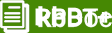
<style>
.page{position:relative;width:112px;height:33px;background:#468803}
.page>*{position:absolute;margin:0}
.t1{font:22px "ArialMT";letter-spacing:0.01em;color:#ffffff;font-weight:bold}
</style>
<div class="page">
<p class="t1" style="left:37px;top:9px;width:72px;height:17px">PPBT+</p>
</div>
